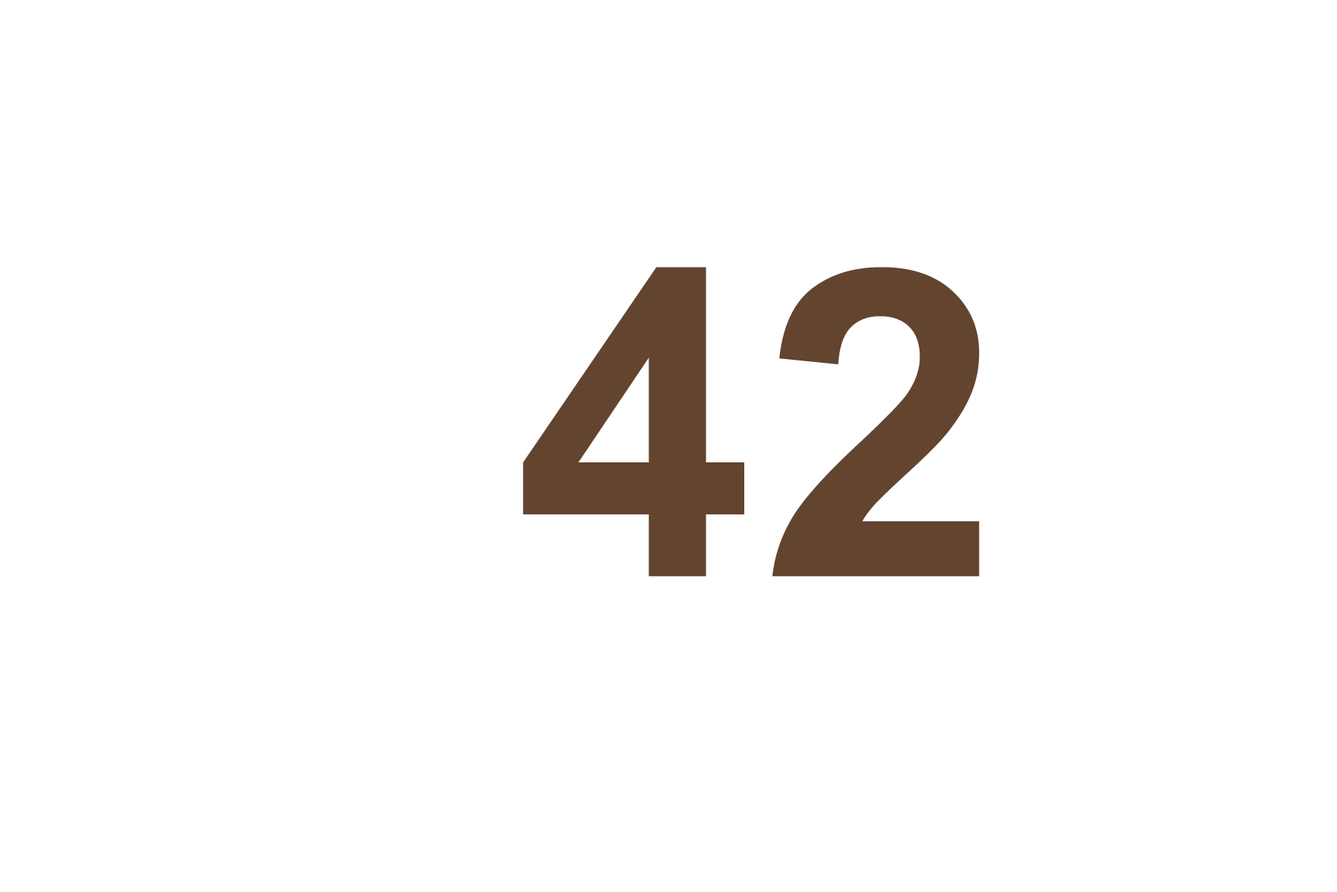
<style>
.page{position:relative;width:1337px;height:892px;background:#ffffff}
.page>*{position:absolute;margin:0}
.t1{font:429.6px "Arial-BoldMT";color:#63442f}
</style>
<div class="page">
<p class="t1" style="left:523px;top:267px;width:457px;height:310px">42</p>
</div>
